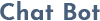
<style>
.page{position:relative;width:100px;height:21px;background:#ffffff}
.page>*{position:absolute;margin:0}
.t1{font:24px "JosefinSans-Bold";color:#475f7b}
</style>
<div class="page">
<p class="t1" style="left:0px;top:1px;width:100px;height:19px">Chat Bot</p>
</div>
